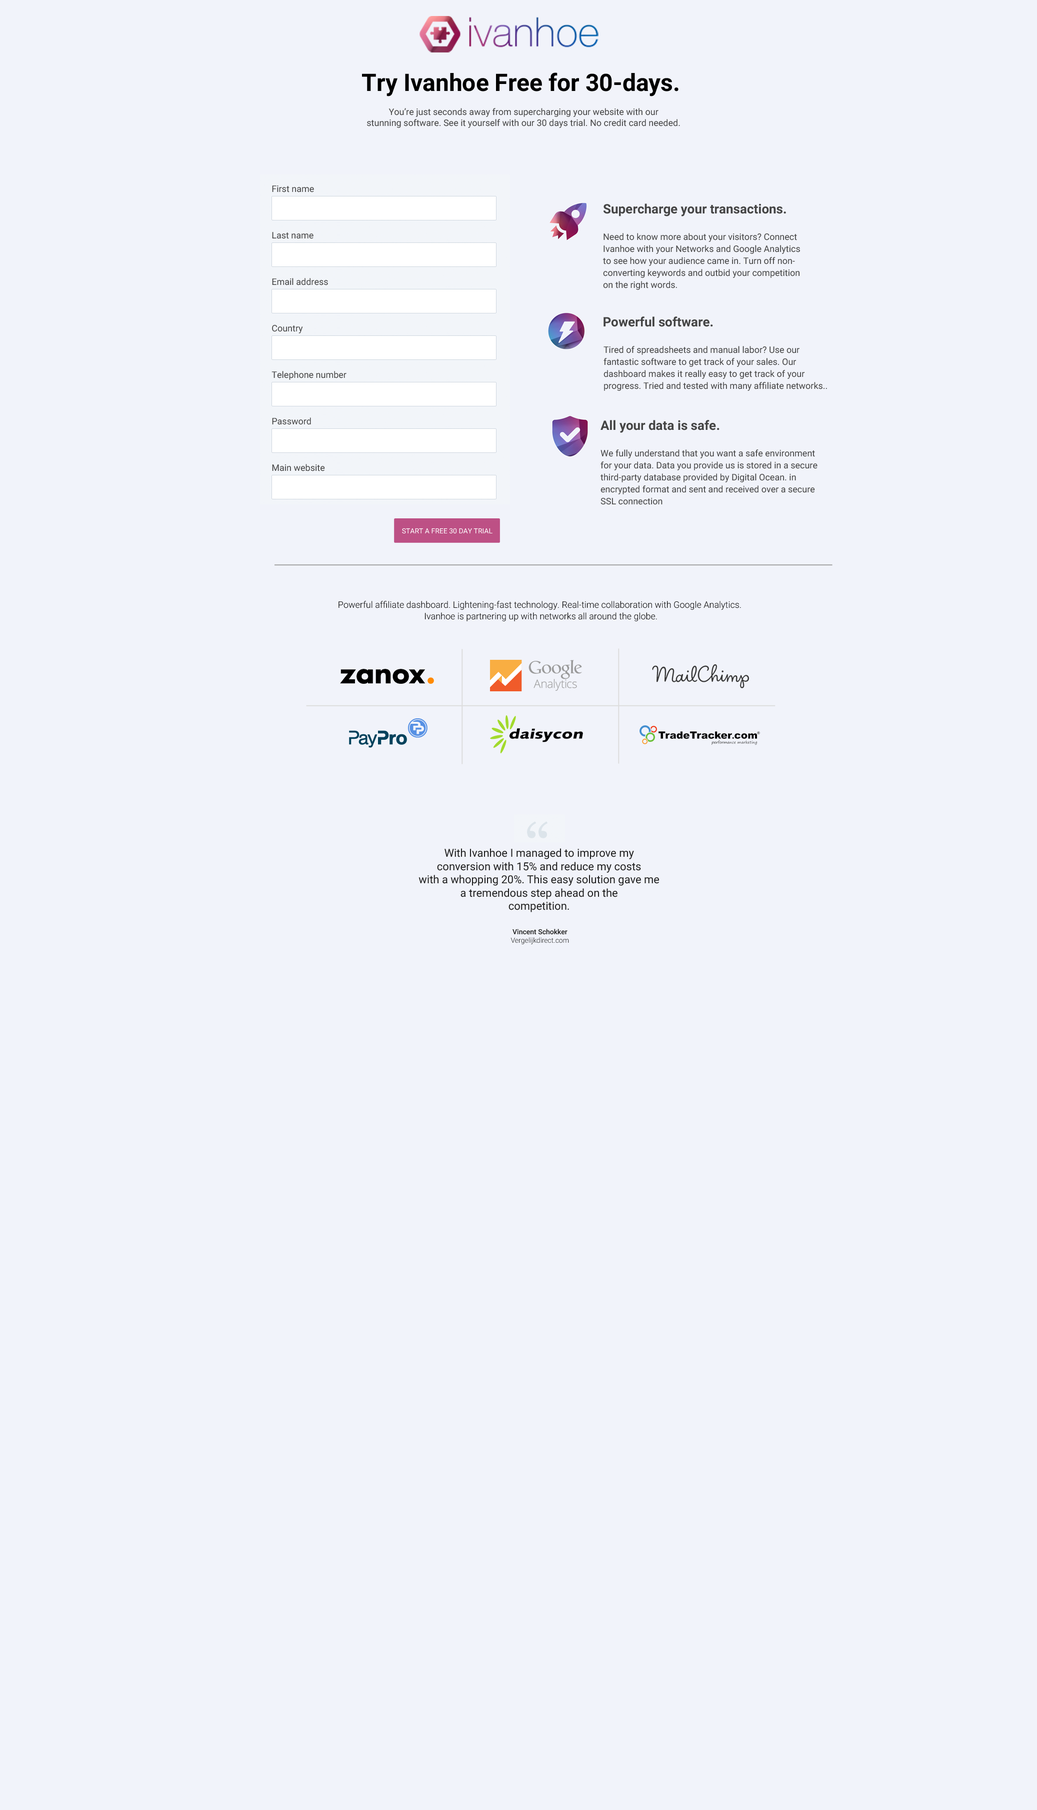
<style>
.page{position:relative;width:1037px;height:1810px;background:#f1f3fa}
.page>*{position:absolute;margin:0}
.t1{font:24px "Roboto-Bold";color:#000000}
.t2{font:9px "Roboto-Regular";color:#444444}
.t3{font:9px/46.5px "Roboto-Regular";color:#444444}
.t4{font:13px "Roboto-Bold";color:#444444}
.t5{font:9px/12px "Roboto-Regular";color:#444444}
.t6{font:7px "Roboto-Regular";color:#ffffff;text-transform:uppercase}
.t7{font:9px/11.5px "Roboto-Light";color:#000000}
.t8{font:11px "Roboto-Regular";color:#1e1e1e}
.t9{font:7px "Roboto-Light";color:#1e1e1e}
.t10{font:7px "Roboto-Medium";color:#1e1e1e}
</style>
<div class="page">
<p class="t1" style="left:362px;top:72px;width:316px;height:24px">Try Ivanhoe Free for 30-days.</p>
<p class="t2" style="left:367px;top:108px;width:313px;height:20px;text-align:center">You’re just seconds away from supercharging your website with our<br>stunning software. See it yourself with our 30 days trial. No credit card needed.</p>
<p class="t3" style="left:272px;top:186px;width:74px;height:286px">First name<br>Last name<br>Email address<br>Country<br>Telephone number<br>Password<br>Main website</p>
<p class="t4" style="left:604px;top:204px;width:182px;height:12px">Supercharge your transactions.</p>
<p class="t5" style="left:603px;top:233px;width:197px;height:57px">Need to know more about your visitors? Connect<br>Ivanhoe with your Networks and Google Analytics<br>to see how your audience came in. Turn off non-<br>converting keywords and outbid your competition<br>on the right words.</p>
<p class="t4" style="left:604px;top:316px;width:109px;height:11px">Powerful software.</p>
<p class="t5" style="left:604px;top:346px;width:223px;height:45px">Tired of spreadsheets and manual labor? Use our<br>fantastic software to get track of your sales. Our <br>dashboard makes it really easy to get track of your <br>progress. Tried and tested with many affiliate networks..</p>
<p class="t4" style="left:600px;top:420px;width:120px;height:13px">All your data is safe.</p>
<p class="t5" style="left:600px;top:450px;width:218px;height:55px">We fully understand that you want a safe environment<br>for your data. Data you provide us is stored in a secure <br>third-party database provided by Digital Ocean. in <br>encrypted format and sent and received over a secure <br>SSL connection</p>
<p class="t6" style="left:402px;top:528px;width:90px;height:6px">start a free 30 day trial</p>
<p class="t7" style="left:338px;top:601px;width:403px;height:21px;text-align:center">Powerful affiliate dashboard. Lightening-fast technology. Real-time collaboration with Google Analytics. <br>Ivanhoe is partnering up with networks all around the globe.</p>
<p class="t8" style="left:418px;top:848px;width:241px;height:64px;text-align:center">With Ivanhoe I managed to improve my<br>conversion with 15% and reduce my costs<br>with a whopping 20%. This easy solution gave me<br>a tremendous step ahead on the<br>competition.</p>
<p class="t9" style="left:510px;top:929px;width:59px;height:15px;text-align:center"><span class="t10">Vincent Schokker<br></span>Vergelijkdirect.com</p>
</div>
